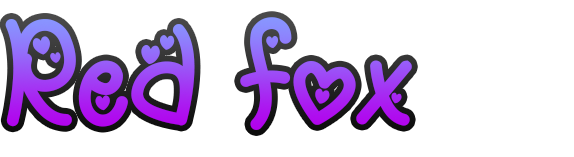
<style>
.page{position:relative;width:574px;height:157px;background:#ffffff}
.page>*{position:absolute;margin:0}
.t1{font:150px "MyLoveLetterRegular"}
</style>
<div class="page">
<p class="t1" style="left:5px;top:17px;width:407px;height:113px">Red Fox</p>
</div>
